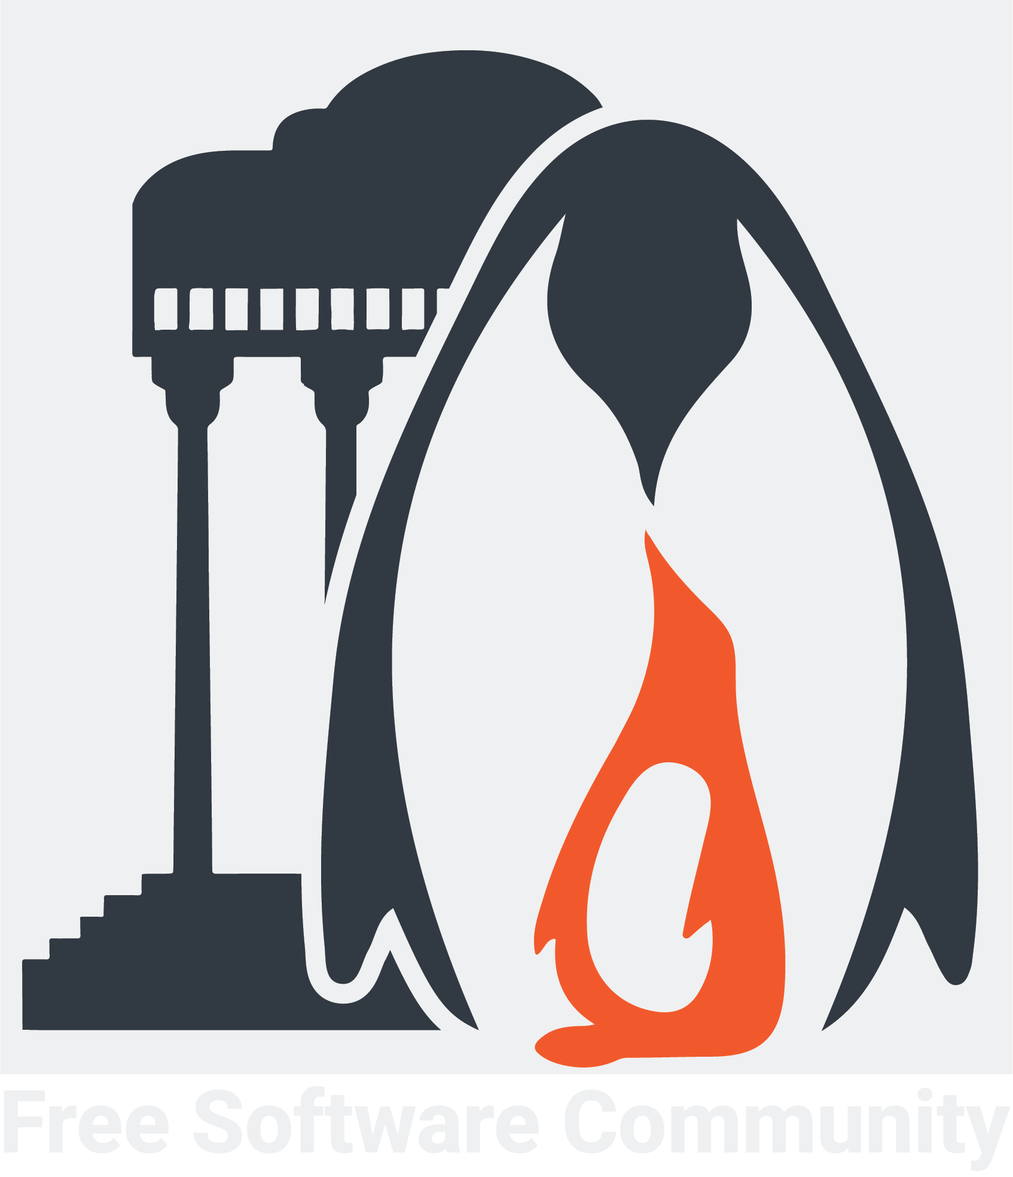
<style>
.page{position:relative;width:1013px;height:1177px;background:#eff0f1}
.page>*{position:absolute;margin:0}
.t1{font:87.2px "Vazirmatn-ExtraBold";letter-spacing:-0.006em;color:#eff0f1}
</style>
<div class="page">
<p class="t1" style="left:4px;top:1086px;width:1007px;height:85px">Free Software Community</p>
</div>
